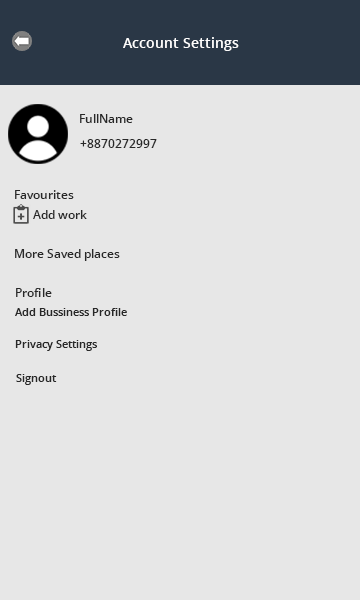
<style>
.page{position:relative;width:360px;height:600px;background:#e7e7e7}
.page>*{position:absolute;margin:0}
.t1{font:14px "OpenSans-Semibold";color:#fefdfd}
.t2{font:12px "OpenSans-Semibold";color:#282828}
.t3{font:11px "OpenSans-Semibold";color:#282828}
</style>
<div class="page">
<p class="t1" style="left:123px;top:37px;width:116px;height:14px">Account Settings</p>
<p class="t2" style="left:80px;top:114px;width:53px;height:9px">FullName</p>
<p class="t2" style="left:80px;top:139px;width:77px;height:9px">+8870272997</p>
<p class="t2" style="left:15px;top:190px;width:59px;height:9px">Favourites</p>
<p class="t2" style="left:33px;top:210px;width:54px;height:9px">Add work</p>
<p class="t2" style="left:15px;top:249px;width:105px;height:12px">More Saved places</p>
<p class="t2" style="left:16px;top:288px;width:36px;height:9px">Profile</p>
<p class="t3" style="left:15px;top:308px;width:112px;height:8px">Add Bussiness Profile</p>
<p class="t3" style="left:15px;top:340px;width:82px;height:11px">Privacy Settings</p>
<p class="t3" style="left:16px;top:374px;width:41px;height:11px">Signout</p>
</div>
